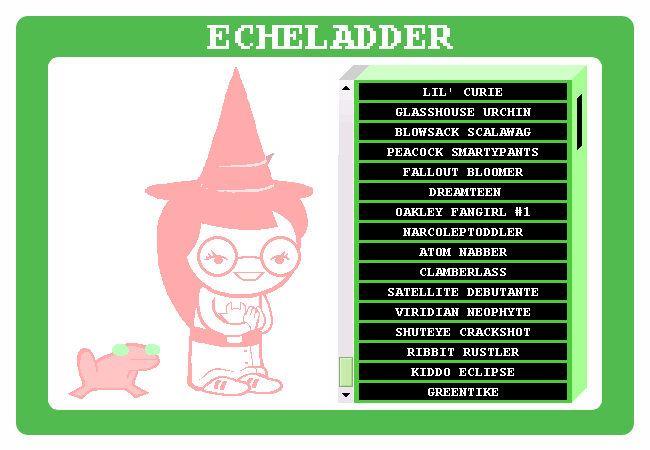
<style>
.page{position:relative;width:650px;height:450px;background:#ffffff}
.page>*{position:absolute;margin:0}
.t1{font:14px "CourierNewPS-BoldMT";color:#ffffff}
</style>
<div class="page">
<p class="t1" style="left:423px;top:88px;width:79px;height:8px">LIL' CURIE</p>
<p class="t1" style="left:396px;top:108px;width:135px;height:8px">GLASSHOUSE URCHIN</p>
<p class="t1" style="left:395px;top:128px;width:136px;height:8px">BLOWSACK SCALAWAG</p>
<p class="t1" style="left:387px;top:148px;width:151px;height:8px">PEACOCK SMARTYPANTS</p>
<p class="t1" style="left:403px;top:168px;width:120px;height:8px">FALLOUT BLOOMER</p>
<p class="t1" style="left:429px;top:188px;width:72px;height:8px">DREAMTEEN</p>
<p class="t1" style="left:396px;top:207px;width:134px;height:9px">OAKLEY FANGIRL #1</p>
<p class="t1" style="left:403px;top:228px;width:120px;height:8px">NARCOLEPTODDLER</p>
<p class="t1" style="left:419px;top:248px;width:88px;height:8px">ATOM NABBER</p>
<p class="t1" style="left:420px;top:268px;width:86px;height:8px">CLAMBERLASS</p>
<p class="t1" style="left:388px;top:288px;width:150px;height:8px">SATELLITE DEBUTANTE</p>
<p class="t1" style="left:395px;top:308px;width:135px;height:8px">VIRIDIAN NEOPHYTE</p>
<p class="t1" style="left:396px;top:328px;width:134px;height:8px">SHUTEYE CRACKSHOT</p>
<p class="t1" style="left:407px;top:348px;width:112px;height:8px">RIBBIT RUSTLER</p>
<p class="t1" style="left:411px;top:368px;width:103px;height:8px">KIDDO ECLIPSE</p>
<p class="t1" style="left:428px;top:388px;width:70px;height:8px">GREENTIKE</p>
</div>
